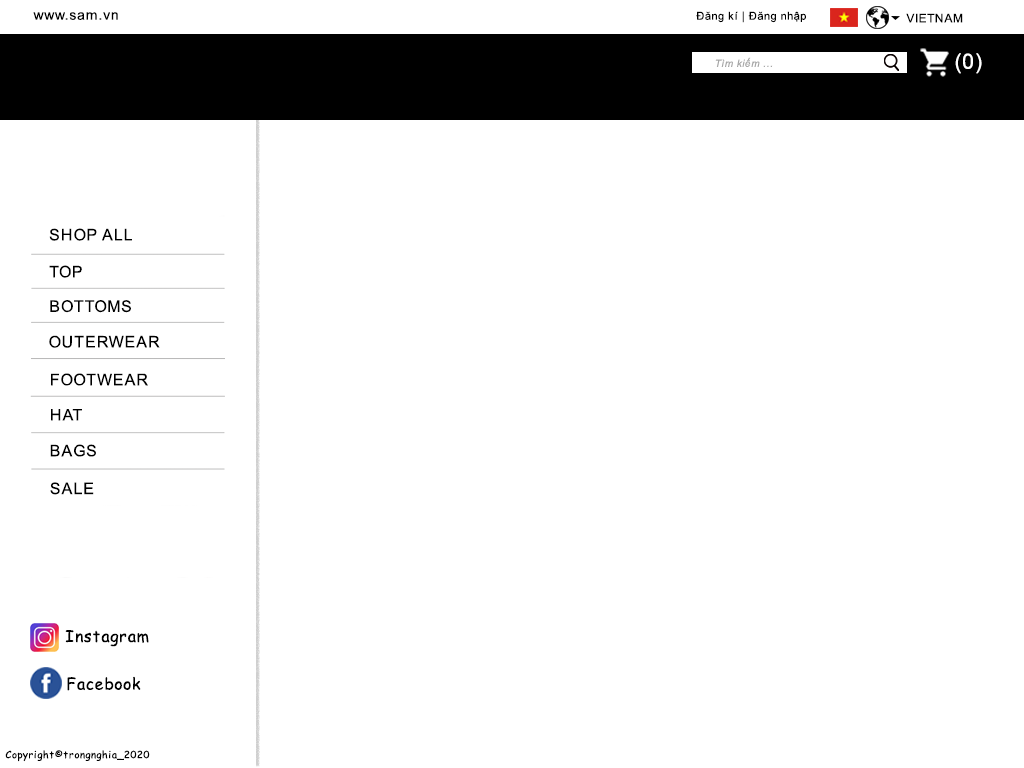
<style>
.page{position:relative;width:1024px;height:768px;background:#ffffff}
.page>*{position:absolute;margin:0}
.t1{font:14px "ArialMT";letter-spacing:0.05em;color:#000000}
.t2{font:11px "ArialMT";letter-spacing:0.05em;color:#000000}
.t3{font:12px "ArialMT";letter-spacing:0.05em;color:#000000}
.t4{font:21px "ArialMT";letter-spacing:0.05em;color:#ffffff}
.t5{font:10px "Arial-ItalicMT";letter-spacing:0.05em;color:#a7a7a7}
.t6{font:16px "ArialMT";letter-spacing:0.05em;color:#000000}
.t7{font:16px "ComicSansMS";letter-spacing:0.05em;color:#000000}
.t8{font:10px "ComicSansMS";letter-spacing:0.05em;color:#000000}
</style>
<div class="page">
<p class="t1" style="left:33px;top:12px;width:85px;height:8px">www.sam.vn</p>
<p class="t2" style="left:696px;top:11px;width:110px;height:12px">Đăng kí | Đăng nhập</p>
<p class="t3" style="left:906px;top:13px;width:57px;height:10px">VIETNAM</p>
<p class="t4" style="left:955px;top:53px;width:27px;height:21px">(0)</p>
<p class="t5" style="left:715px;top:57px;width:58px;height:10px">Tìm kiếm ...</p>
<p class="t6" style="left:49px;top:228px;width:83px;height:13px">SHOP ALL</p>
<p class="t6" style="left:49px;top:265px;width:33px;height:13px">TOP</p>
<p class="t6" style="left:50px;top:300px;width:81px;height:13px">BOTTOMS</p>
<p class="t6" style="left:49px;top:335px;width:111px;height:13px">OUTERWEAR</p>
<p class="t6" style="left:51px;top:373px;width:97px;height:13px">FOOTWEAR</p>
<p class="t6" style="left:51px;top:409px;width:31px;height:12px">HAT</p>
<p class="t6" style="left:50px;top:444px;width:46px;height:13px">BAGS</p>
<p class="t6" style="left:50px;top:482px;width:44px;height:13px">SALE</p>
<p class="t7" style="left:65px;top:630px;width:84px;height:17px">Instagram</p>
<p class="t7" style="left:67px;top:676px;width:74px;height:15px">Facebook</p>
<p class="t8" style="left:5px;top:750px;width:145px;height:12px">Copyright©trongnghia_2020</p>
</div>
